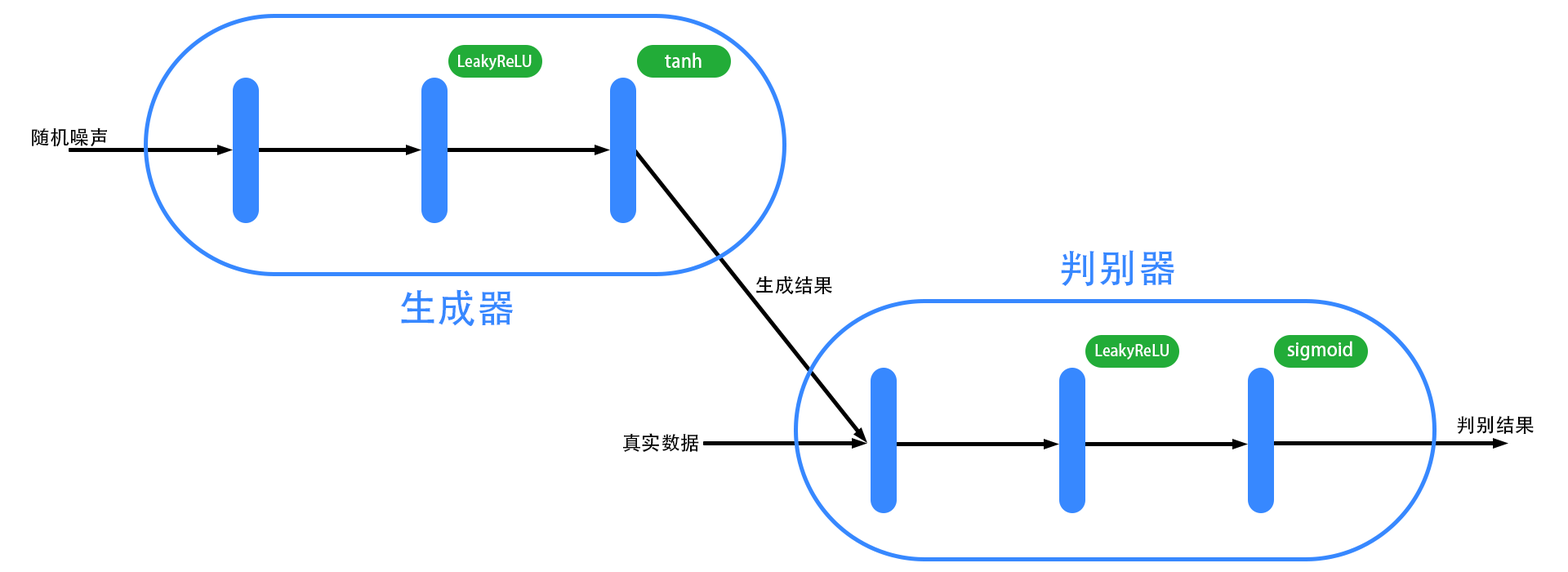
<style>
.page{position:relative;width:1568px;height:572px;background:#ffffff}
.page>*{position:absolute;margin:0}
.t1{font:15.1px "AdobeHeitiStd-Regular";color:#ffffff}
.t2{font:18.1px "AdobeHeitiStd-Regular";color:#ffffff}
.t3{font:19.6px "AdobeHeitiStd-Regular";color:#000000}
.t4{font:39.2px "AdobeHeitiStd-Regular";color:#3788ff}
</style>
<div class="page">
<p class="t1" style="left:458px;top:54px;width:74px;height:16px">LeakyReLU</p>
<p class="t2" style="left:665px;top:52px;width:37px;height:16px">tanh</p>
<p class="t3" style="left:32px;top:127px;width:75px;height:20px">随机噪声</p>
<p class="t4" style="left:1061px;top:250px;width:113px;height:37px">判别器</p>
<p class="t3" style="left:756px;top:275px;width:76px;height:19px">生成结果</p>
<p class="t4" style="left:400px;top:289px;width:113px;height:37px">生成器</p>
<p class="t2" style="left:1287px;top:341px;width:65px;height:19px">sigmoid</p>
<p class="t1" style="left:1095px;top:343px;width:74px;height:16px">LeakyReLU</p>
<p class="t3" style="left:1457px;top:416px;width:77px;height:18px">判别结果</p>
<p class="t3" style="left:623px;top:433px;width:76px;height:19px">真实数据</p>
</div>
